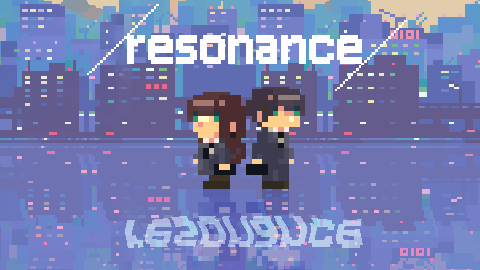
<style>
.page{position:relative;width:480px;height:270px}
.page>*{position:absolute;margin:0}
.t1{font:42.9px "Galmuri11-Bold";color:#fdfdfd}
</style>
<div class="page">
<p class="t1" style="left:127px;top:35px;width:235px;height:29px">resonance</p>
</div>
